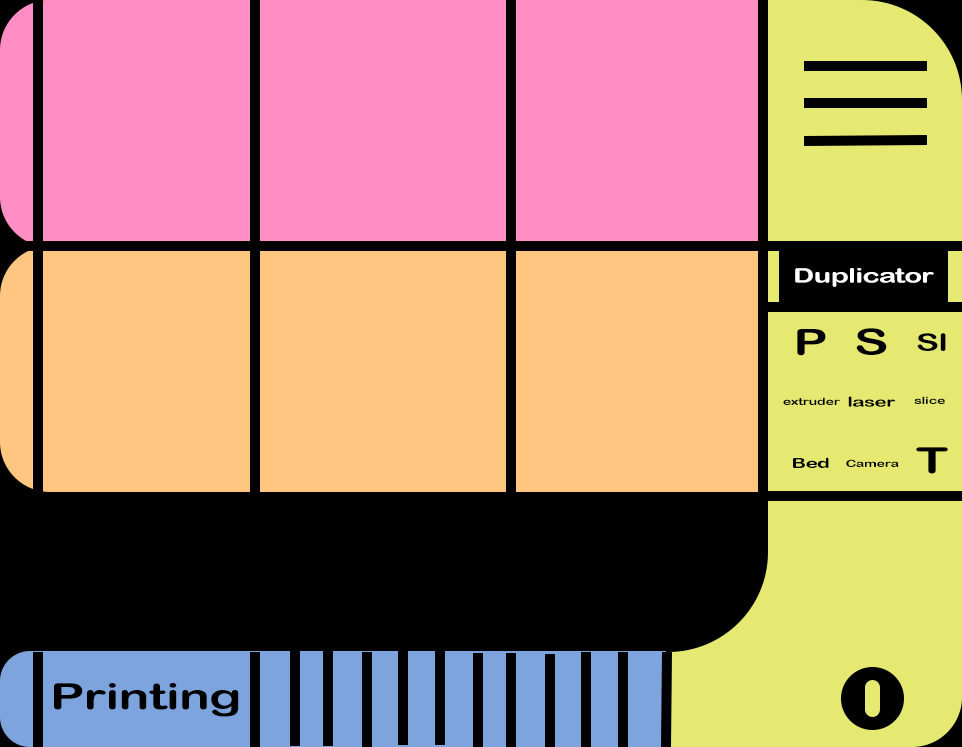
<style>
.page{position:relative;width:962px;height:747px;background:#000000}
.page>*{position:absolute;margin:0}
.t1{font:20px "ArialRoundedMTBold";letter-spacing:-0.02em;color:#ffffff;scale:1.44 1}
.t2{font:36px "ArialRoundedMTBold";letter-spacing:-0.02em;color:#000000;scale:1.44 1}
.t3{font:24px "ArialRoundedMTBold";letter-spacing:-0.02em;color:#000000;scale:1.44 1}
.t4{font:10px "ArialRoundedMTBold";letter-spacing:-0.02em;color:#000000;scale:1.44 1}
.t5{font:14px "ArialRoundedMTBold";letter-spacing:-0.02em;color:#000000;scale:1.44 1}
</style>
<div class="page">
<p class="t1" style="left:795px;top:268px;width:139px;height:19px">Duplicator</p>
<p class="t2" style="left:797px;top:329px;width:29px;height:27px">P</p>
<p class="t2" style="left:856px;top:328px;width:31px;height:27px">S</p>
<p class="t3" style="left:917px;top:333px;width:29px;height:18px">Sl</p>
<p class="t4" style="left:783px;top:397px;width:57px;height:8px">extruder</p>
<p class="t5" style="left:848px;top:396px;width:47px;height:11px">laser</p>
<p class="t4" style="left:914px;top:396px;width:31px;height:8px">slice</p>
<p class="t2" style="left:916px;top:447px;width:32px;height:27px">T</p>
<p class="t5" style="left:793px;top:457px;width:36px;height:11px">Bed</p>
<p class="t4" style="left:846px;top:459px;width:53px;height:8px">Camera</p>
<p class="t2" style="left:54px;top:683px;width:185px;height:34px">Printing</p>
</div>
